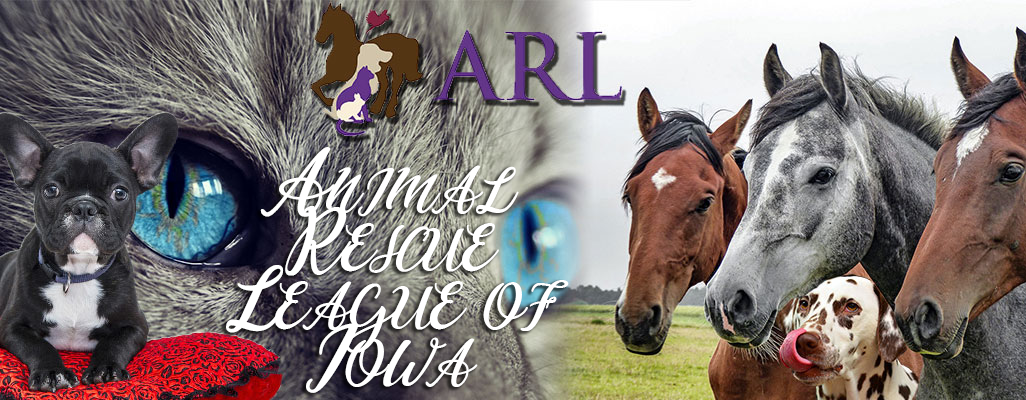
<style>
.page{position:relative;width:1026px;height:400px}
.page>*{position:absolute;margin:0}
.t1{font:48px "CassandraPersonalUse-Regular";letter-spacing:0.01em;color:#ffffff;font-variant:small-caps}
</style>
<div class="page">
<p class="t1" style="left:226px;top:147px;width:343px;height:246px;text-align:center">Animal Rescue League of Iowa</p>
</div>
